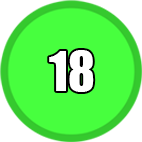
<style>
.page{position:relative;width:142px;height:142px;background:#47ff3e}
.page>*{position:absolute;margin:0}
.t1{font:50px "Impact";color:#ffffff}
</style>
<div class="page">
<p class="t1" style="left:49px;top:50px;width:45px;height:42px">18</p>
</div>
